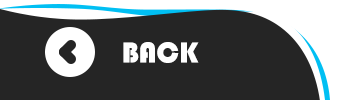
<style>
.page{position:relative;width:340px;height:100px;background:#252525}
.page>*{position:absolute;margin:0}
.t1{font:30px "Bauhaus93";color:#ffffff}
</style>
<div class="page">
<p class="t1" style="left:123px;top:42px;width:76px;height:21px">BACK</p>
</div>
